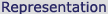
<style>
.page{position:relative;width:108px;height:14px;background:#dedede}
.page>*{position:absolute;margin:0}
.t1{font:14px "Verdana";color:#292765}
</style>
<div class="page">
<p class="t1" style="left:2px;top:1px;width:104px;height:14px">Representation</p>
</div>
